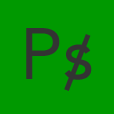
<style>
.page{position:relative;width:114px;height:114px;background:#009900}
.page>*{position:absolute;margin:0}
.t1{font:72px "Avenir-Roman";color:#333333}
</style>
<div class="page">
<p class="t1" style="left:26px;top:28px;width:66px;height:52px">Ps</p>
<p class="t1" style="left:64px;top:34px;width:27px;height:57px">/</p>
</div>
